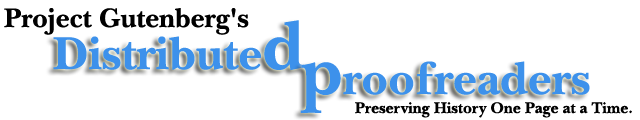
<style>
.page{position:relative;width:640px;height:120px;background:#ffffff}
.page>*{position:absolute;margin:0}
.t1{font:28px "NewBaskerville-Bold";color:#000000}
.t2{font:48px "NewBaskerville-Bold";color:#3d91eb}
.t3{font:72px "NewBaskerville-Bold";color:#3d91eb}
.t4{font:16px "NewBaskerville-Bold";color:#000000}
</style>
<div class="page">
<p class="t1" style="left:4px;top:8px;width:245px;height:27px">Project Gutenberg's</p>
<p class="t2" style="left:53px;top:20px;width:251px;height:51px">Distribute<span class="t3">d</span></p>
<p class="t2" style="left:300px;top:61px;width:290px;height:52px"><span class="t3">p</span>roofreaders</p>
<p class="t4" style="left:355px;top:102px;width:277px;height:16px">Preserving History One Page at a Time.</p>
</div>
